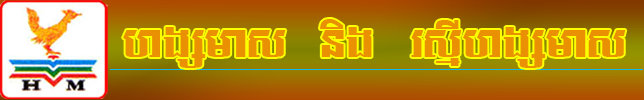
<style>
.page{position:relative;width:644px;height:100px}
.page>*{position:absolute;margin:0}
.t1{font:77.2px "LmnTTFantBig";color:#e99003}
</style>
<div class="page">
<p class="t1" style="left:123px;top:19px;width:503px;height:49px">hgSmas nig rsµIhgSmas</p>
</div>
